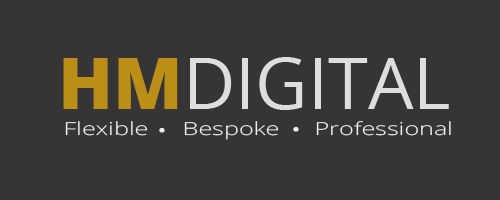
<style>
.page{position:relative;width:500px;height:200px;background:#363434}
.page>*{position:absolute;margin:0}
.t1{font:72px "OpenSans";color:#dedede}
.t2{font:72px "OpenSans-Extrabold";color:#bb8f17}
.t3{font:18px "OpenSans-Light";color:#efefef;scale:1.4 1}
.t4{font:48px "OpenSans-Light";color:#efefef;scale:1.4 1}
</style>
<div class="page">
<p class="t1" style="left:63px;top:57px;width:386px;height:53px"><span class="t2">HM</span>DIGITAL</p>
<p class="t3" style="left:65px;top:121px;width:83px;height:15px">Flexible</p>
<p class="t3" style="left:184px;top:121px;width:95px;height:19px">Bespoke</p>
<p class="t3" style="left:316px;top:121px;width:135px;height:15px">Professional</p>
<p class="t4" style="left:159px;top:128px;width:6px;height:5px">.</p>
<p class="t4" style="left:293px;top:127px;width:6px;height:5px">.</p>
</div>
